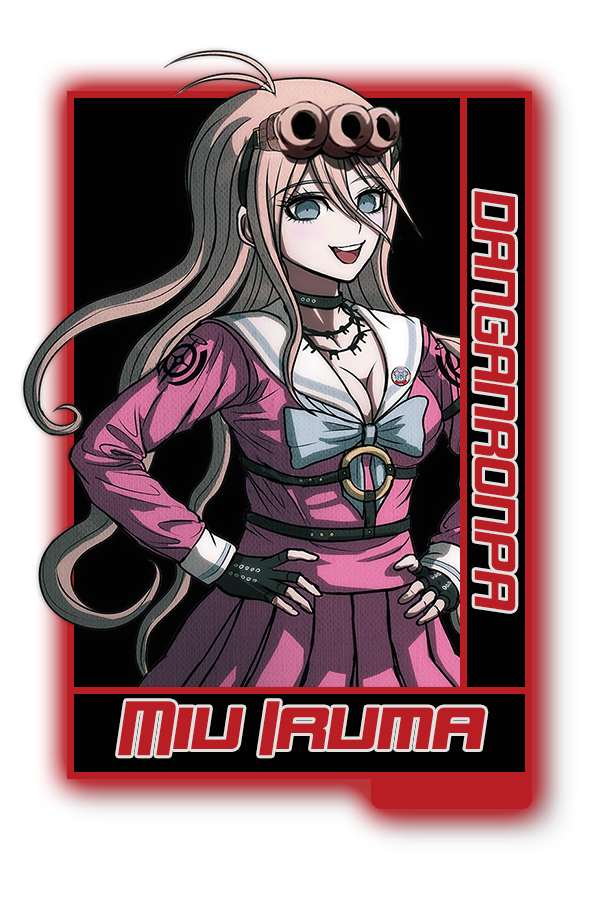
<style>
.page{position:relative;width:600px;height:900px;background:#ffffff}
.page>*{position:absolute;margin:0}
.t1{font:48.8px "DorBlue";color:#bb2c2e}
.t2{font:65.2px "DorBlue";color:#bb2c2e}
</style>
<div class="page">
<p class="t1" style="left:474px;top:191px;width:42px;height:420px;rotate:90deg">DANGANRONPA</p>
<p class="t2" style="left:118px;top:701px;width:368px;height:55px">Miu Iruma</p>
</div>
